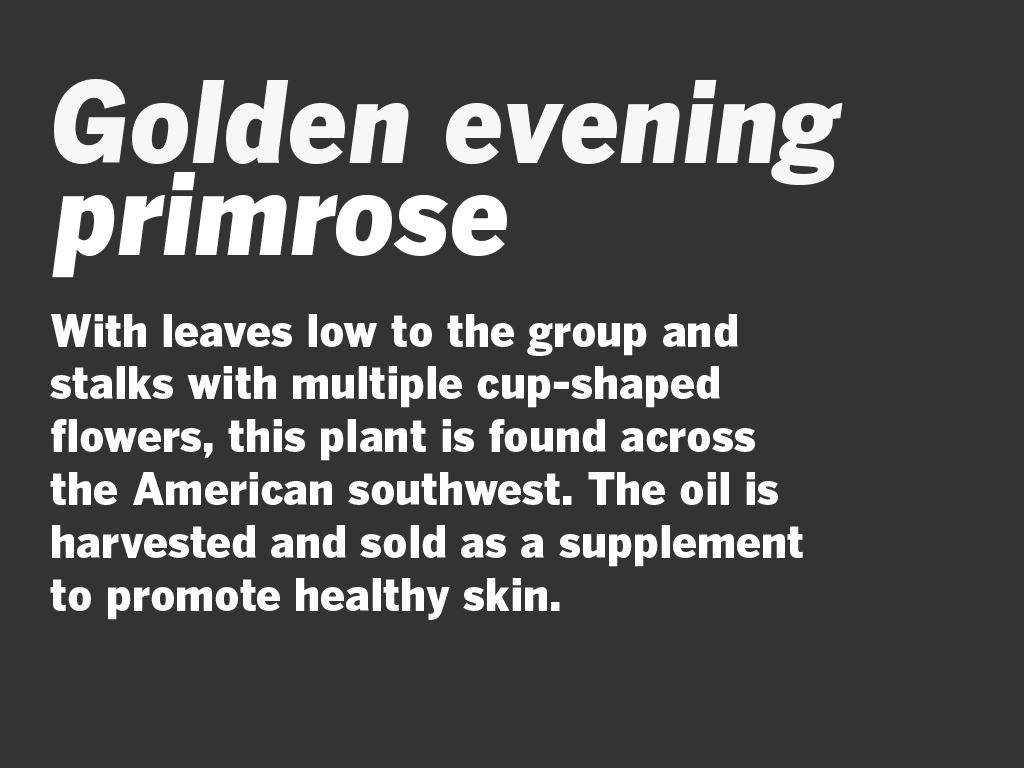
<style>
.page{position:relative;width:1024px;height:768px;background:#333333}
.page>*{position:absolute;margin:0}
.t1{font:44px "BentonGothic-Black";color:#f7f7f7}
.t2{font:112px "BentonGothic-BlackItalic";color:#f7f7f7}
.t3{font:112px "BentonGothic-BlackItalic";color:#ffffff}
.t4{font:44px "BentonGothic-Black";color:#fefefe}
</style>
<div class="page">
<p class="t1" style="left:54px;top:79px;width:789px;height:106px"><span class="t2">Golden evening<br><br><br></span>Geraea canescens</p>
<p class="t3" style="left:52px;top:171px;width:455px;height:107px">primrose</p>
<p class="t4" style="left:50px;top:314px;width:753px;height:306px">With leaves low to the group and stalks with multiple cup-shaped flowers, this plant is found across the American southwest. The oil is harvested and sold as a supplement to promote healthy skin.</p>
</div>
